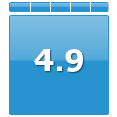
<style>
.page{position:relative;width:117px;height:117px;background:#2793cf}
.page>*{position:absolute;margin:0}
.t1{font:36px "Colaborate-Bold";color:#ffffff;text-transform:uppercase}
</style>
<div class="page">
<p class="t1" style="left:34px;top:49px;width:49px;height:23px">4.9</p>
</div>
